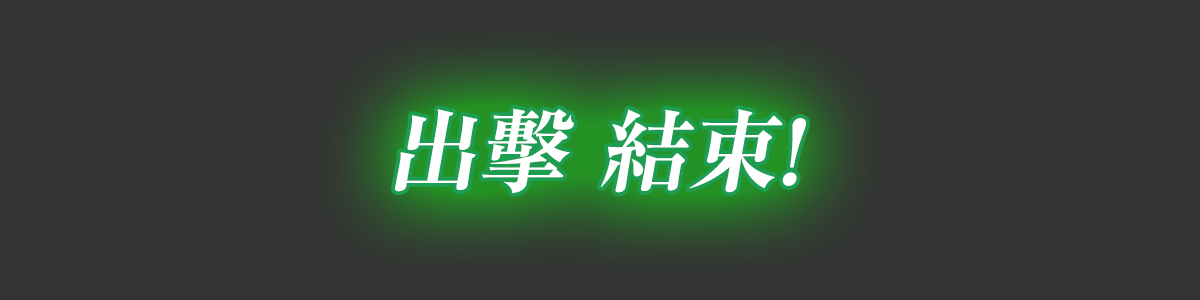
<style>
.page{position:relative;width:1200px;height:300px;background:#333333}
.page>*{position:absolute;margin:0}
.t1{font:90px "RyuminPr6N-ExBold";color:#ffffff;font-style:italic}
</style>
<div class="page">
<p class="t1" style="left:395px;top:108px;width:411px;height:86px">出擊 結束!</p>
</div>
